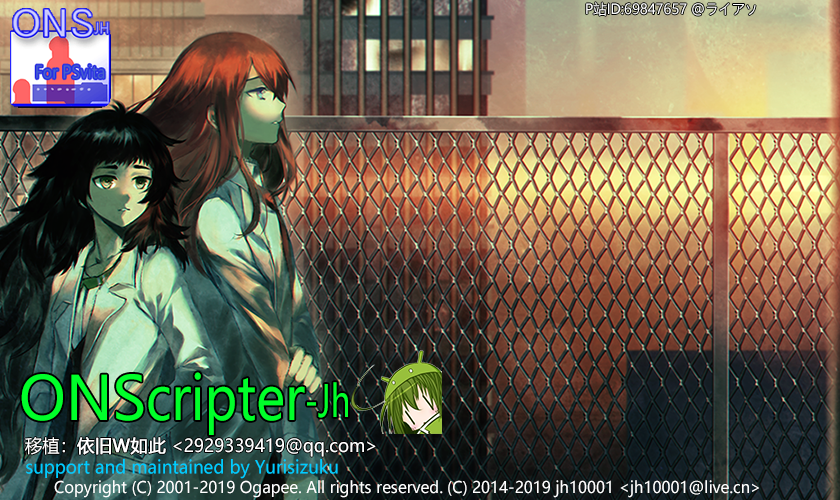
<style>
.page{position:relative;width:840px;height:500px}
.page>*{position:absolute;margin:0}
.t1{font:14px "MicrosoftYaHei";color:#ffffff;scale:0.96 1}
.t2{font:60px "MicrosoftYaHei";color:#00ff2a;scale:0.85 1}
.t3{font:60px "MicrosoftYaHei";color:#00ff2a;scale:0.96 1}
.t4{font:43.6px "MicrosoftYaHei";color:#00ff2a;scale:0.73 1}
.t5{font:18px "MicrosoftYaHei";color:#ffffff;scale:0.96 1}
.t6{font:18px "MicrosoftYaHei";color:#ffffff;font-weight:bold;scale:0.96 1}
.t7{font:18px "MicrosoftYaHei";color:#00ccff;scale:0.96 1}
.t8{font:16px "MicrosoftYaHei";color:#ffffff;scale:0.96 1}
</style>
<div class="page">
<p class="t1" style="left:586px;top:2px;width:170px;height:14px">P站ID:69847657 @ライアソ</p>
<p class="t2" style="left:21px;top:372px;width:327px;height:63px"><span class="t3">ONS</span>cripter<span class="t4">-Jh</span></p>
<p class="t5" style="left:25px;top:437px;width:351px;height:20px">移植：<span class="t6">依旧W如此</span> &lt;2929339419@qq.com&gt;</p>
<p class="t7" style="left:26px;top:459px;width:312px;height:20px">support and maintained by Yurisizuku</p>
<p class="t8" style="left:54px;top:480px;width:389px;height:18px">Copyright (C) 2001-2019 Ogapee. All rights reserved.</p>
<p class="t8" style="left:448px;top:480px;width:311px;height:18px">(C) 2014-2019 jh10001 &lt;jh10001@live.cn&gt;</p>
</div>
